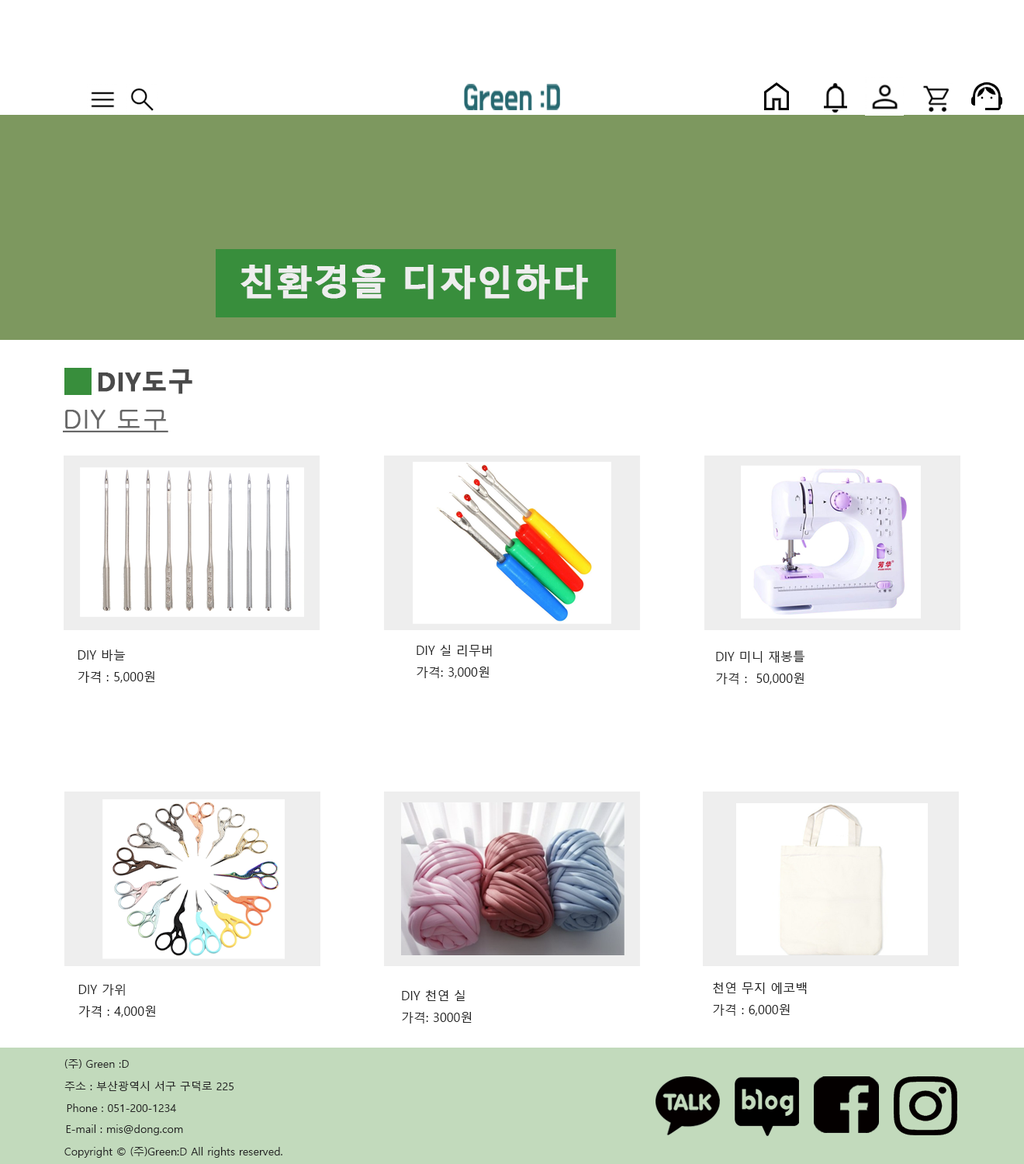
<style>
.page{position:relative;width:1024px;height:1164px;background:#ffffff}
.page>*{position:absolute;margin:0}
.t1{font:36.5px "MalgunGothicBold";color:#eeeeee;font-weight:bold}
.t2{font:25.6px "MalgunGothicBold";color:#4a4a4a;font-weight:bold}
.t3{font:25.6px "Gulim";color:#676767;font-weight:bold;text-decoration:underline}
.t4{font:12.4px "MalgunGothic";color:#262626}
.t5{font:10.9px "MalgunGothic";color:#262626}
</style>
<div class="page">
<p class="t1" style="left:241px;top:265px;width:347px;height:35px">친환경을 디자인하다</p>
<p class="t2" style="left:98px;top:369px;width:94px;height:25px">DIY도구</p>
<p class="t3" style="left:63px;top:410px;width:105px;height:23px">DIY 도구</p>
<p class="t4" style="left:78px;top:650px;width:77px;height:33px">DIY 바늘<br>가격 : 5,000원</p>
<p class="t4" style="left:417px;top:645px;width:75px;height:33px">DIY 실 리무버<br>가격: 3,000원</p>
<p class="t4" style="left:716px;top:650px;width:90px;height:34px">DIY 미니 재봉틀<br>가격 :  50,000원</p>
<p class="t4" style="left:78px;top:984px;width:78px;height:33px">DIY 가위 <br>가격 : 4,000원</p>
<p class="t4" style="left:713px;top:982px;width:94px;height:34px">천연 무지 에코백 <br>가격 : 6,000원</p>
<p class="t4" style="left:402px;top:990px;width:70px;height:34px">DIY 천연 실<br>가격: 3000원</p>
<p class="t5" style="left:64px;top:1059px;width:65px;height:10px">(주) Green :D</p>
<p class="t5" style="left:64px;top:1081px;width:170px;height:10px">주소 : 부산광역시 서구 구덕로 225</p>
<p class="t5" style="left:67px;top:1104px;width:109px;height:8px">Phone : 051-200-1234</p>
<p class="t5" style="left:66px;top:1124px;width:117px;height:11px">E-mail : mis@dong.com</p>
<p class="t5" style="left:64px;top:1147px;width:218px;height:11px">Copyright © (주)Green:D All rights reserved.</p>
</div>
